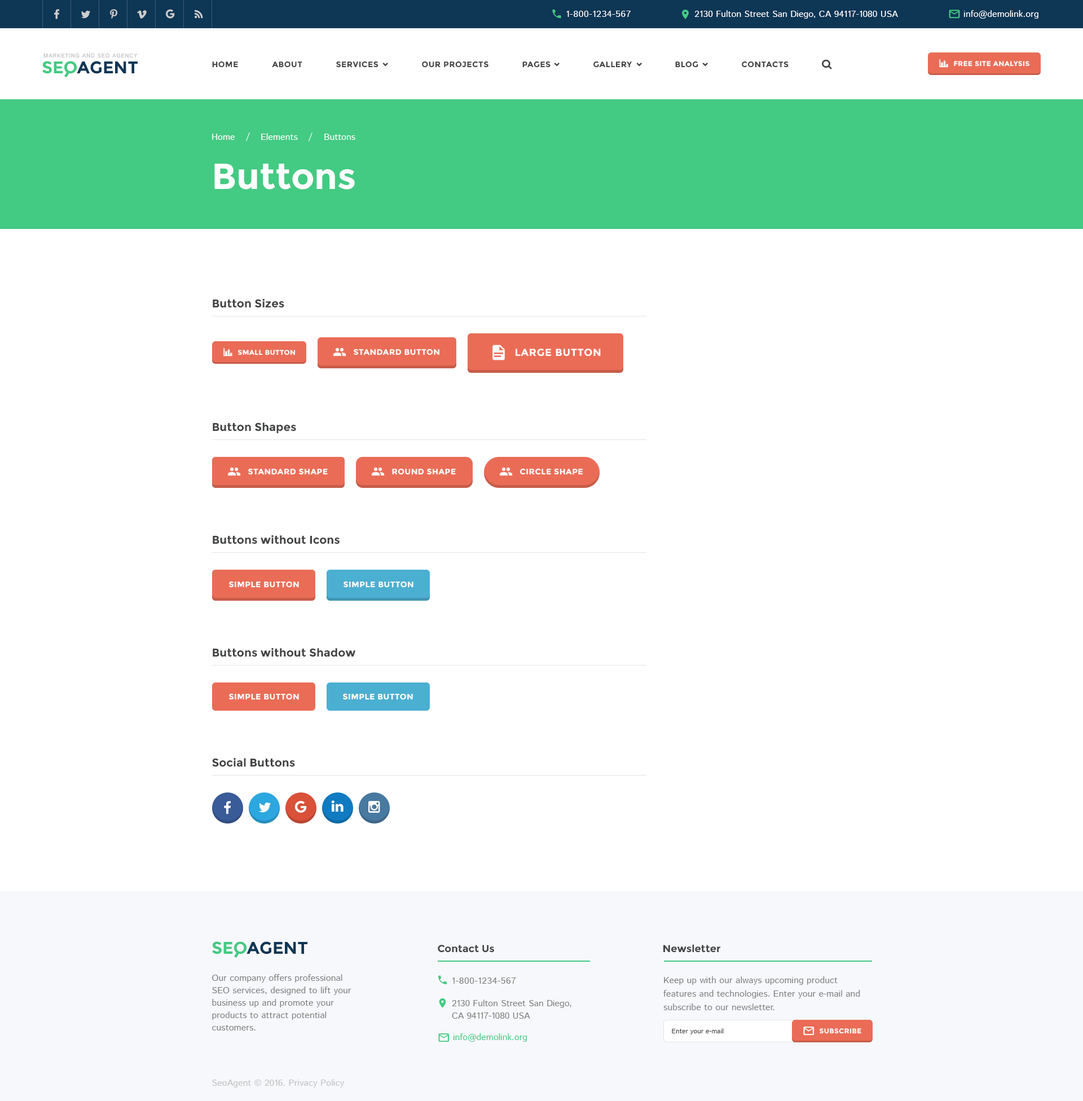
<style>
.page{position:relative;width:1083px;height:1101px;background:#ffffff}
.page>*{position:absolute;margin:0}
.t1{font:9px "IstokWeb-Regular";letter-spacing:0.04em;color:#ffffff;text-transform:uppercase}
.t2{font:9px "IstokWeb-Regular";color:#ffffff}
.t3{font:5.6px "IstokWeb-Regular";letter-spacing:0.08em;color:#c1c1c1;text-transform:uppercase}
.t4{font:16.9px "Montserrat-Bold";color:#43ca83}
.t5{font:16.9px "Montserrat-Bold";color:#0e3655}
.t6{font:7.9px "Montserrat-Bold";letter-spacing:0.04em;color:#424343;text-transform:uppercase}
.t7{font:6.8px "Montserrat-Bold";letter-spacing:0.04em;color:#ffffff;text-transform:uppercase}
.t8{font:36.1px "Montserrat-Bold";color:#ffffff}
.t9{font:11.3px "Montserrat-Bold";color:#424343}
.t10{font:7.9px "Montserrat-Bold";letter-spacing:0.04em;color:#ffffff;text-transform:uppercase}
.t11{font:10.2px "Montserrat-Bold";letter-spacing:0.04em;color:#ffffff;text-transform:uppercase}
.t12{font:10.2px "Montserrat-Bold";color:#424343}
.t13{font:9px/12.4px "IstokWeb-Regular";color:#7f7f7f}
.t14{font:9px "IstokWeb-Regular";letter-spacing:0.04em;color:#7f7f7f;text-transform:uppercase}
.t15{font:9px/13.5px "IstokWeb-Regular";color:#7f7f7f}
.t16{font:9px "IstokWeb-Regular";color:#43ca83}
.t17{font:6.8px "IstokWeb-Regular";color:#424343}
.t18{font:9px "IstokWeb-Regular";color:#c0c0c0}
</style>
<div class="page">
<p class="t1" style="left:566px;top:11px;width:65px;height:6px">1-800-1234-567</p>
<p class="t2" style="left:694px;top:10px;width:204px;height:9px">2130 Fulton Street San Diego, CA 94117-1080 USA</p>
<p class="t2" style="left:964px;top:10px;width:74px;height:9px">info@demolink.org</p>
<p class="t3" style="left:43px;top:54px;width:95px;height:4px">Marketing and SEO agency</p>
<p class="t4" style="left:42px;top:61px;width:35px;height:13px">SEO</p>
<p class="t5" style="left:77px;top:61px;width:61px;height:13px">AGENT</p>
<p class="t6" style="left:212px;top:61px;width:26px;height:7px">Home</p>
<p class="t6" style="left:272px;top:61px;width:30px;height:7px">about</p>
<p class="t6" style="left:336px;top:61px;width:42px;height:7px">services</p>
<p class="t6" style="left:422px;top:61px;width:66px;height:7px">our projects</p>
<p class="t6" style="left:522px;top:61px;width:29px;height:7px">pages</p>
<p class="t6" style="left:593px;top:61px;width:39px;height:7px">gallery</p>
<p class="t6" style="left:675px;top:61px;width:23px;height:7px">blog</p>
<p class="t6" style="left:742px;top:61px;width:47px;height:7px">contacts</p>
<p class="t7" style="left:954px;top:61px;width:75px;height:6px">Free Site Analysis</p>
<p class="t2" style="left:212px;top:134px;width:23px;height:6px">Home</p>
<p class="t2" style="left:246px;top:133px;width:4px;height:9px">/</p>
<p class="t2" style="left:261px;top:133px;width:37px;height:7px">Elements</p>
<p class="t2" style="left:309px;top:133px;width:3px;height:9px">/</p>
<p class="t2" style="left:324px;top:134px;width:31px;height:6px">Buttons</p>
<p class="t8" style="left:214px;top:164px;width:141px;height:26px">Buttons</p>
<p class="t9" style="left:213px;top:298px;width:71px;height:10px">Button Sizes</p>
<p class="t7" style="left:238px;top:350px;width:58px;height:5px">small button</p>
<p class="t10" style="left:354px;top:349px;width:85px;height:6px">standard button</p>
<p class="t11" style="left:516px;top:349px;width:85px;height:7px">large button</p>
<p class="t9" style="left:213px;top:422px;width:83px;height:11px">Button Shapes</p>
<p class="t10" style="left:248px;top:468px;width:80px;height:7px">standard shape</p>
<p class="t10" style="left:392px;top:468px;width:64px;height:7px">round shape</p>
<p class="t10" style="left:520px;top:468px;width:63px;height:7px">circle shape</p>
<p class="t9" style="left:213px;top:535px;width:127px;height:9px">Buttons without Icons</p>
<p class="t10" style="left:229px;top:581px;width:70px;height:7px">simple button</p>
<p class="t10" style="left:344px;top:581px;width:69px;height:7px">simple button</p>
<p class="t9" style="left:213px;top:648px;width:143px;height:9px">Buttons without Shadow</p>
<p class="t10" style="left:229px;top:693px;width:70px;height:7px">simple button</p>
<p class="t10" style="left:343px;top:693px;width:70px;height:7px">simple button</p>
<p class="t9" style="left:212px;top:758px;width:83px;height:9px">Social Buttons</p>
<p class="t4" style="left:212px;top:941px;width:34px;height:13px">SEO</p>
<p class="t5" style="left:246px;top:941px;width:61px;height:13px">AGENT</p>
<p class="t12" style="left:438px;top:945px;width:56px;height:8px">Contact Us</p>
<p class="t12" style="left:663px;top:944px;width:57px;height:9px">Newsletter</p>
<p class="t13" style="left:212px;top:974px;width:139px;height:57px">Our company offers professional SEO services, designed to lift your business up and promote your products to attract potential customers.</p>
<p class="t14" style="left:452px;top:978px;width:64px;height:6px">1-800-1234-567</p>
<p class="t15" style="left:663px;top:976px;width:197px;height:34px">Keep up with our always upcoming product features and technologies. Enter your e-mail and subscribe to our newsletter.</p>
<p class="t13" style="left:452px;top:1000px;width:119px;height:19px">2130 Fulton Street San Diego,<br>CA 94117-1080 USA</p>
<p class="t16" style="left:453px;top:1033px;width:74px;height:9px">info@demolink.org</p>
<p class="t17" style="left:672px;top:1028px;width:52px;height:6px">Enter your e-mail</p>
<p class="t7" style="left:820px;top:1028px;width:41px;height:6px">subscribe</p>
<p class="t18" style="left:212px;top:1079px;width:133px;height:9px">SeoAgent © 2016. Privacy Policy</p>
</div>
